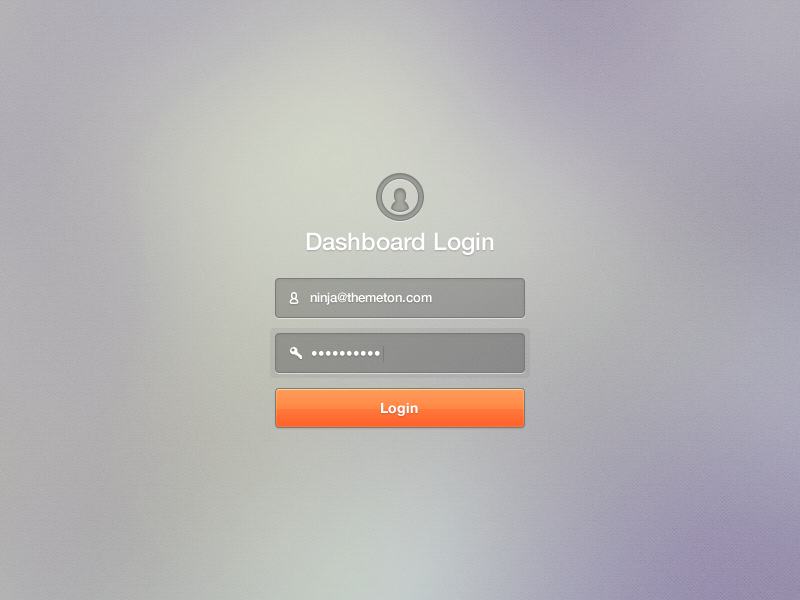
<style>
.page{position:relative;width:800px;height:600px}
.page>*{position:absolute;margin:0}
.t1{font:24px "HelveticaNeueLTPro-Md";color:#ffffff}
.t2{font:13px "HelveticaNeueLTPro-Md";color:#ffffff}
.t3{font:13px "HelveticaNeueLTPro-Roman";color:#ffffff}
.t4{font:14px "HelveticaNeueLTPro-Bd";color:#ffffff}
</style>
<div class="page">
<p class="t1" style="left:306px;top:232px;width:188px;height:23px">Dashboard Login</p>
<p class="t2" style="left:310px;top:292px;width:122px;height:13px">ninja@themeton.com</p>
<p class="t3" style="left:312px;top:351px;width:68px;height:5px">••••••••••</p>
<p class="t4" style="left:381px;top:403px;width:37px;height:13px">Login</p>
</div>
